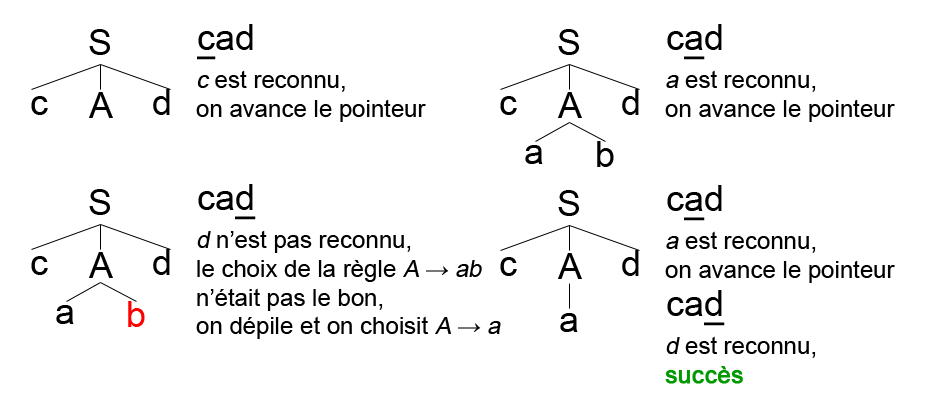
<style>
.page{position:relative;width:929px;height:409px;background:#ffffff}
.page>*{position:absolute;margin:0}
.t1{font:36px "ArialMT";color:#000000}
.t2{font:36px "ArialMT";color:#000000;text-decoration:underline}
.t3{font:24px "ArialMT";color:#000000}
.t4{font:24px "ArialMT";color:#000000;font-style:italic}
.t5{font:36px "ArialMT";color:#ff0000}
.t6{font:24px "ArialMT";color:#009900;font-weight:bold}
</style>
<div class="page">
<p class="t1" style="left:89px;top:29px;width:21px;height:26px">S</p>
<p class="t1" style="left:197px;top:24px;width:56px;height:36px"><span class="t2">c</span>ad</p>
<p class="t1" style="left:558px;top:29px;width:21px;height:26px">S</p>
<p class="t1" style="left:667px;top:24px;width:55px;height:36px">c<span class="t2">a</span>d</p>
<p class="t3" style="left:196px;top:70px;width:230px;height:52px"><span class="t4">c</span> est reconnu,<br>on avance le pointeur</p>
<p class="t3" style="left:665px;top:70px;width:230px;height:52px"><span class="t4">a</span> est reconnu,<br>on avance le pointeur</p>
<p class="t1" style="left:153px;top:89px;width:17px;height:26px">d</p>
<p class="t1" style="left:622px;top:89px;width:17px;height:26px">d</p>
<p class="t1" style="left:31px;top:96px;width:17px;height:19px">c</p>
<p class="t1" style="left:89px;top:92px;width:24px;height:26px">A</p>
<p class="t1" style="left:500px;top:96px;width:17px;height:19px">c</p>
<p class="t1" style="left:558px;top:92px;width:24px;height:26px">A</p>
<p class="t1" style="left:525px;top:145px;width:18px;height:19px">a</p>
<p class="t1" style="left:597px;top:141px;width:17px;height:26px">b</p>
<p class="t1" style="left:198px;top:184px;width:58px;height:36px">ca<span class="t2">d</span></p>
<p class="t1" style="left:667px;top:185px;width:55px;height:36px">c<span class="t2">a</span>d</p>
<p class="t1" style="left:89px;top:189px;width:21px;height:26px">S</p>
<p class="t1" style="left:558px;top:190px;width:21px;height:26px">S</p>
<p class="t3" style="left:196px;top:230px;width:305px;height:109px"><span class="t4">d</span> n’est pas reconnu,<br>le choix de la règle <span class="t4">A → ab<br></span>n’était pas le bon,<br>on dépile et on choisit <span class="t4">A → a</span></p>
<p class="t3" style="left:665px;top:231px;width:230px;height:52px"><span class="t4">a</span> est reconnu,<br>on avance le pointeur</p>
<p class="t1" style="left:31px;top:256px;width:17px;height:19px">c</p>
<p class="t1" style="left:89px;top:252px;width:24px;height:26px">A</p>
<p class="t1" style="left:153px;top:249px;width:17px;height:26px">d</p>
<p class="t1" style="left:500px;top:257px;width:17px;height:19px">c</p>
<p class="t1" style="left:558px;top:253px;width:24px;height:26px">A</p>
<p class="t1" style="left:622px;top:250px;width:17px;height:26px">d</p>
<p class="t1" style="left:667px;top:290px;width:58px;height:36px">ca<span class="t2">d</span></p>
<p class="t1" style="left:56px;top:305px;width:18px;height:19px">a</p>
<p class="t5" style="left:128px;top:301px;width:17px;height:26px">b</p>
<p class="t1" style="left:560px;top:313px;width:18px;height:19px">a</p>
<p class="t3" style="left:665px;top:336px;width:151px;height:48px"><span class="t4">d</span> est reconnu,<br><span class="t6">succès</span></p>
</div>
